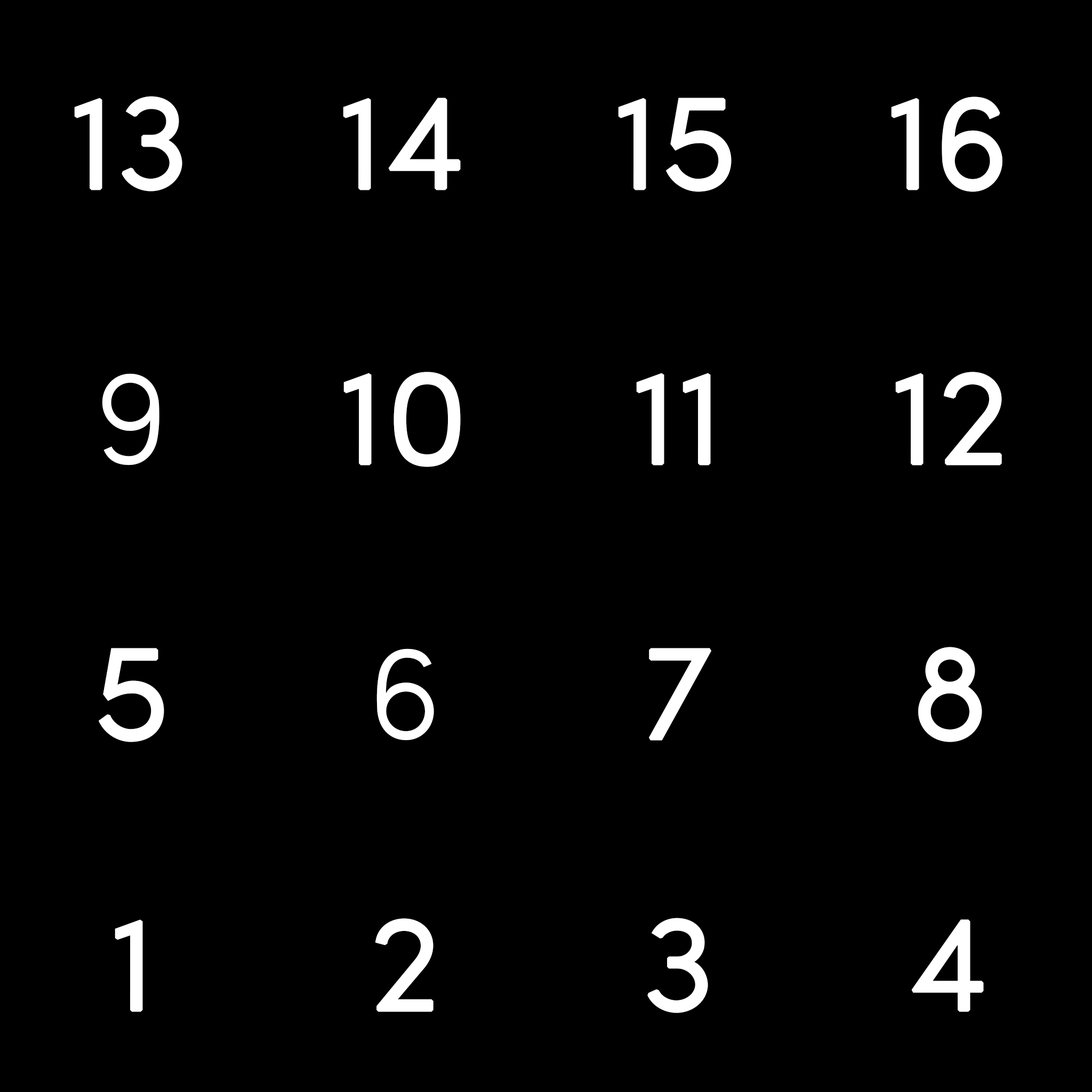
<style>
.page{position:relative;width:1092px;height:1092px;background:#000000}
.page>*{position:absolute;margin:0}
.t1{font:133.3px "SofiaProLight";color:#ffffff;font-weight:bold}
</style>
<div class="page">
<p class="t1" style="left:74px;top:96px;width:108px;height:95px">13</p>
<p class="t1" style="left:343px;top:98px;width:118px;height:92px">14</p>
<p class="t1" style="left:618px;top:98px;width:114px;height:94px">15</p>
<p class="t1" style="left:891px;top:97px;width:111px;height:95px">16</p>
<p class="t1" style="left:102px;top:373px;width:57px;height:92px">9</p>
<p class="t1" style="left:343px;top:372px;width:118px;height:95px">10</p>
<p class="t1" style="left:636px;top:373px;width:75px;height:92px">11</p>
<p class="t1" style="left:895px;top:372px;width:107px;height:93px">12</p>
<p class="t1" style="left:98px;top:648px;width:66px;height:94px">5</p>
<p class="t1" style="left:376px;top:648px;width:58px;height:93px">6</p>
<p class="t1" style="left:649px;top:648px;width:62px;height:93px">7</p>
<p class="t1" style="left:918px;top:647px;width:64px;height:95px">8</p>
<p class="t1" style="left:647px;top:918px;width:61px;height:95px">3</p>
<p class="t1" style="left:115px;top:919px;width:28px;height:93px">1</p>
<p class="t1" style="left:375px;top:918px;width:58px;height:94px">2</p>
<p class="t1" style="left:911px;top:919px;width:73px;height:93px">4</p>
</div>
